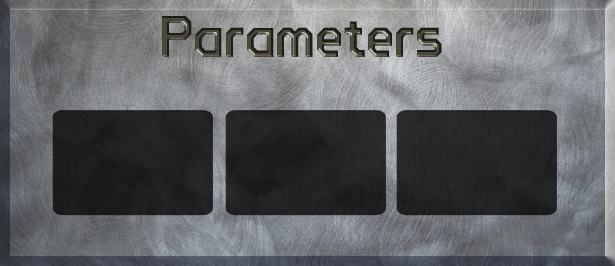
<style>
.page{position:relative;width:615px;height:266px}
.page>*{position:absolute;margin:0}
.t1{font:50px "WillowBody"}
</style>
<div class="page">
<p class="t1" style="left:162px;top:16px;width:280px;height:41px">Parameters</p>
</div>
